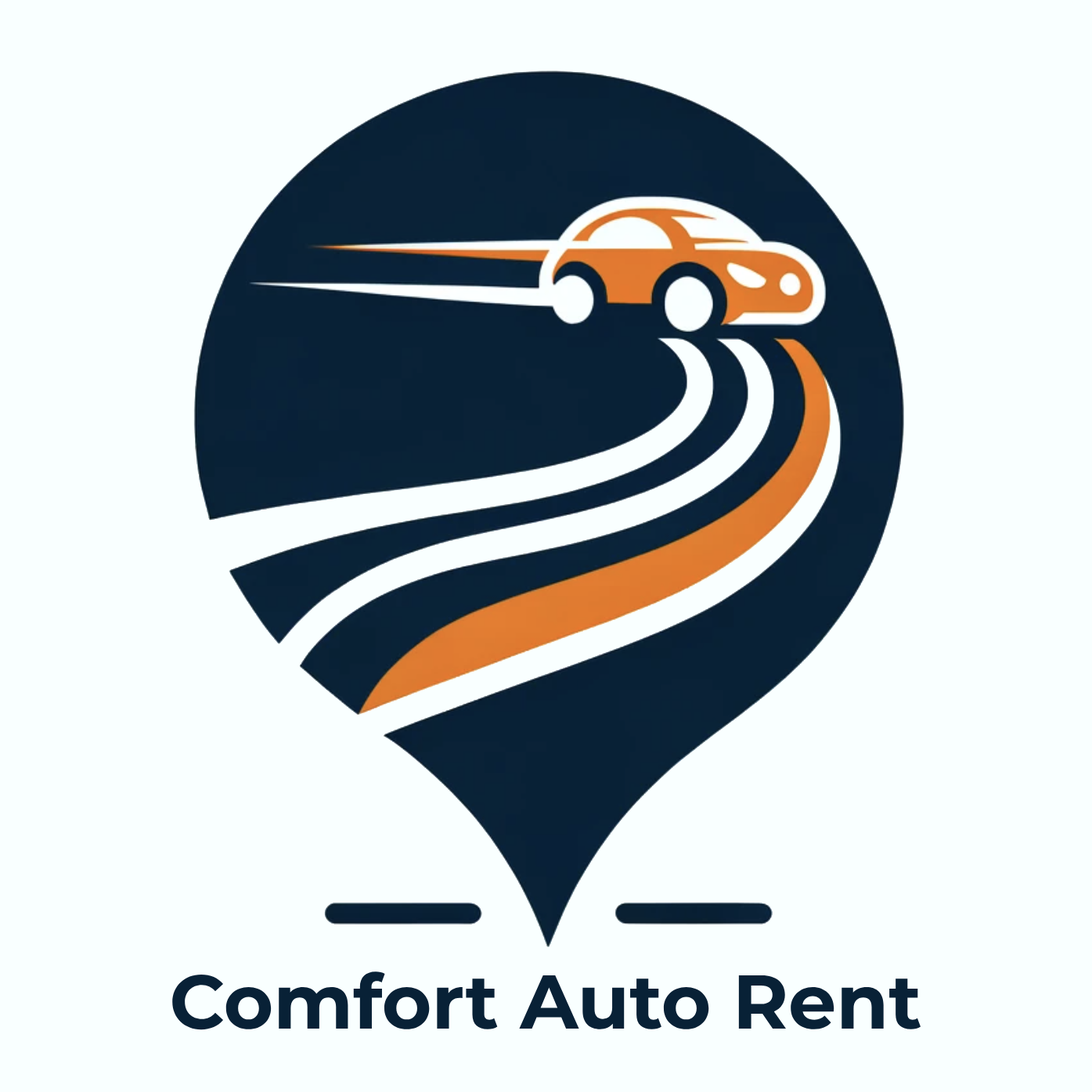
<style>
.page{position:relative;width:1092px;height:1092px;background:#f9ffff}
.page>*{position:absolute;margin:0}
.t1{font:75.9px "Montserrat-Bold";color:#082136}
</style>
<div class="page">
<p class="t1" style="left:172px;top:971px;width:749px;height:59px">Comfort Auto Rent</p>
</div>
